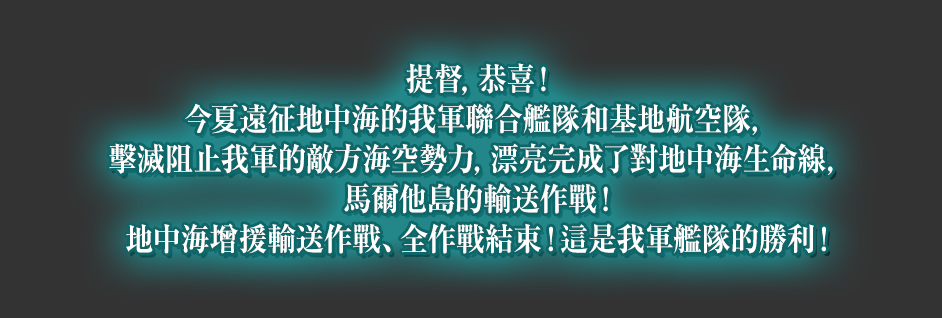
<style>
.page{position:relative;width:942px;height:318px;background:#333333}
.page>*{position:absolute;margin:0}
.t1{font:32px/40px "RyuminPr6N-ExBold";color:#ffffff;scale:0.9 1}
</style>
<div class="page">
<p class="t1" style="left:109px;top:63px;width:724px;height:191px;text-align:center">提督，恭喜！<br>今夏遠征地中海的我軍聯合艦隊和基地航空隊，<br>擊滅阻止我軍的敵方海空勢力，漂亮完成了對地中海生命線，<br>馬爾他島的輸送作戰！<br>地中海增援輸送作戰、全作戰結束！這是我軍艦隊的勝利！</p>
</div>
